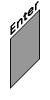
<style>
.page{position:relative;width:50px;height:100px;background:#ffffff}
.page>*{position:absolute;margin:0}
.t1{font:12px "Gadugi";color:#000000;font-weight:bold;scale:1.41 1}
</style>
<div class="page">
<p class="t1" style="left:10px;top:1px;width:29px;height:34px;rotate:-45deg">Enter</p>
</div>
